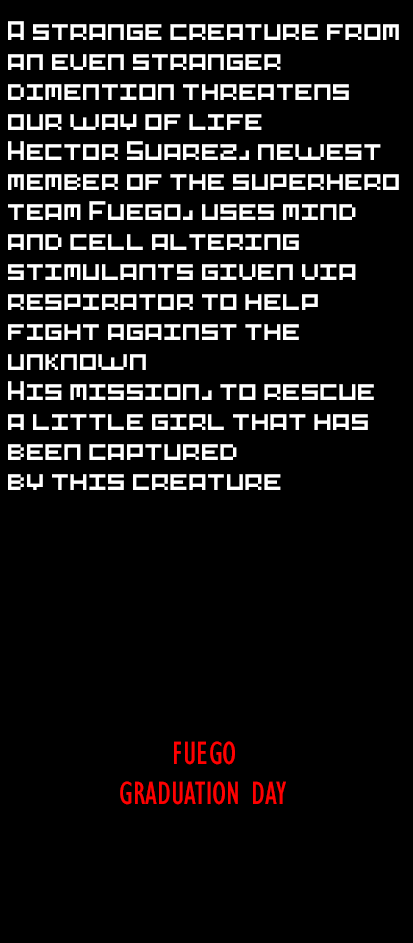
<style>
.page{position:relative;width:413px;height:943px;background:#000000}
.page>*{position:absolute;margin:0}
.t1{font:25px "Pixel-Art";color:#ffffff}
.t2{font:33.3px "GillSansMT-Condensed";color:#ff0000}
</style>
<div class="page">
<p class="t1" style="left:8px;top:21px;width:391px;height:469px">A strange creature from<br>an even stranger <br>dimention threatens <br>our way of life<br>Hector Suarez, newest <br>member of the superhero <br>team Fuego, uses mind <br>and cell altering <br>stimulants given via <br>respirator to help<br>fight against the <br>unknown<br>His mission, to rescue <br>a little girl that has <br>been captured <br>by this creature</p>
<p class="t2" style="left:120px;top:741px;width:166px;height:64px">FUEGO<br>  GRADUATION DAY</p>
</div>
